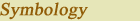
<style>
.page{position:relative;width:140px;height:21px;background:#e6e6b8}
.page>*{position:absolute;margin:0}
.t1{font:18px "TimesNewRomanPSMT";color:#915c07;font-weight:bold;font-style:italic}
</style>
<div class="page">
<p class="t1" style="left:0px;top:2px;width:88px;height:18px">Symbology</p>
</div>
